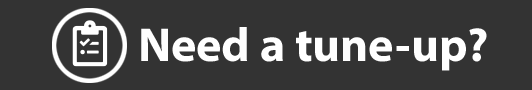
<style>
.page{position:relative;width:532px;height:90px;background:#333333}
.page>*{position:absolute;margin:0}
.t1{font:48px "MyriadPro-Bold";color:#ffffff}
</style>
<div class="page">
<p class="t1" style="left:141px;top:27px;width:346px;height:44px">Need a tune-up?</p>
</div>
